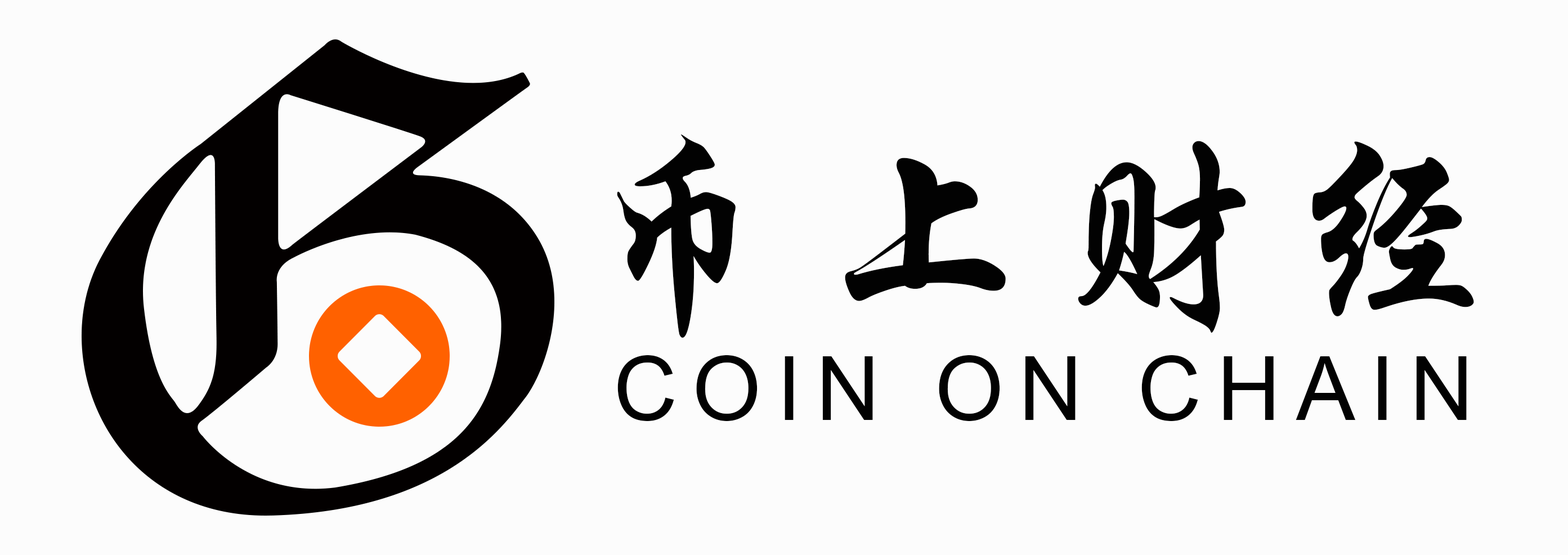
<style>
.page{position:relative;width:1568px;height:555px;background:#fcfcfc}
.page>*{position:absolute;margin:0}
.t1{font:216.3px "STXingkai";letter-spacing:0.1em;color:#020202;text-transform:uppercase}
.t2{font:88.6px "ArialMT";letter-spacing:0.17em;color:#020202;text-transform:uppercase}
</style>
<div class="page">
<p class="t1" style="left:617px;top:134px;width:857px;height:204px">币上财经</p>
<p class="t2" style="left:617px;top:355px;width:850px;height:66px">Coin On Chain</p>
</div>
